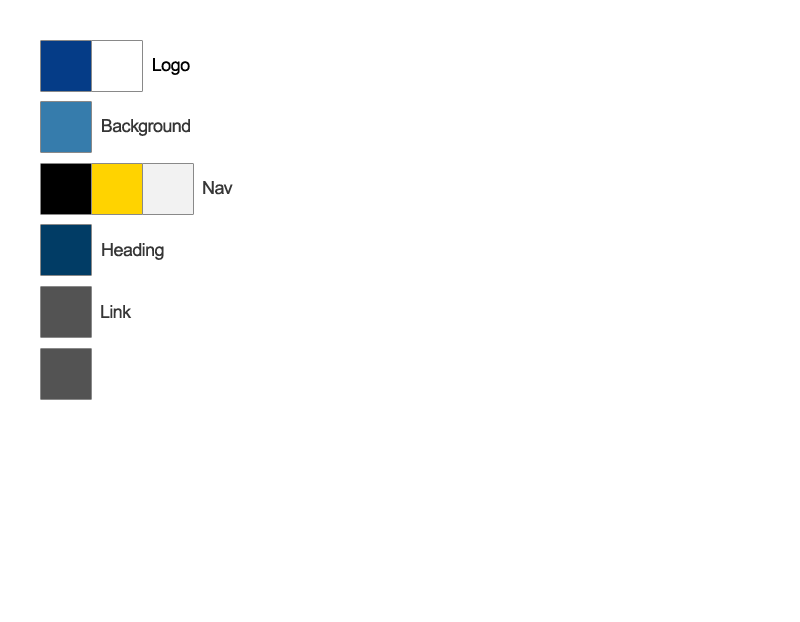
<style>
.page{position:relative;width:800px;height:622px;background:#ffffff}
.page>*{position:absolute;margin:0}
.t1{font:18px "ArialMT";letter-spacing:-0.025em;color:#000000}
.t2{font:18px "ArialMT";letter-spacing:-0.025em;color:#363636}
</style>
<div class="page">
<p class="t1" style="left:153px;top:58px;width:37px;height:17px">Logo</p>
<p class="t2" style="left:102px;top:119px;width:88px;height:17px">Background</p>
<p class="t2" style="left:203px;top:181px;width:30px;height:14px">Nav</p>
<p class="t2" style="left:102px;top:243px;width:62px;height:17px">Heading</p>
<p class="t2" style="left:101px;top:305px;width:31px;height:13px">Link</p>
</div>
